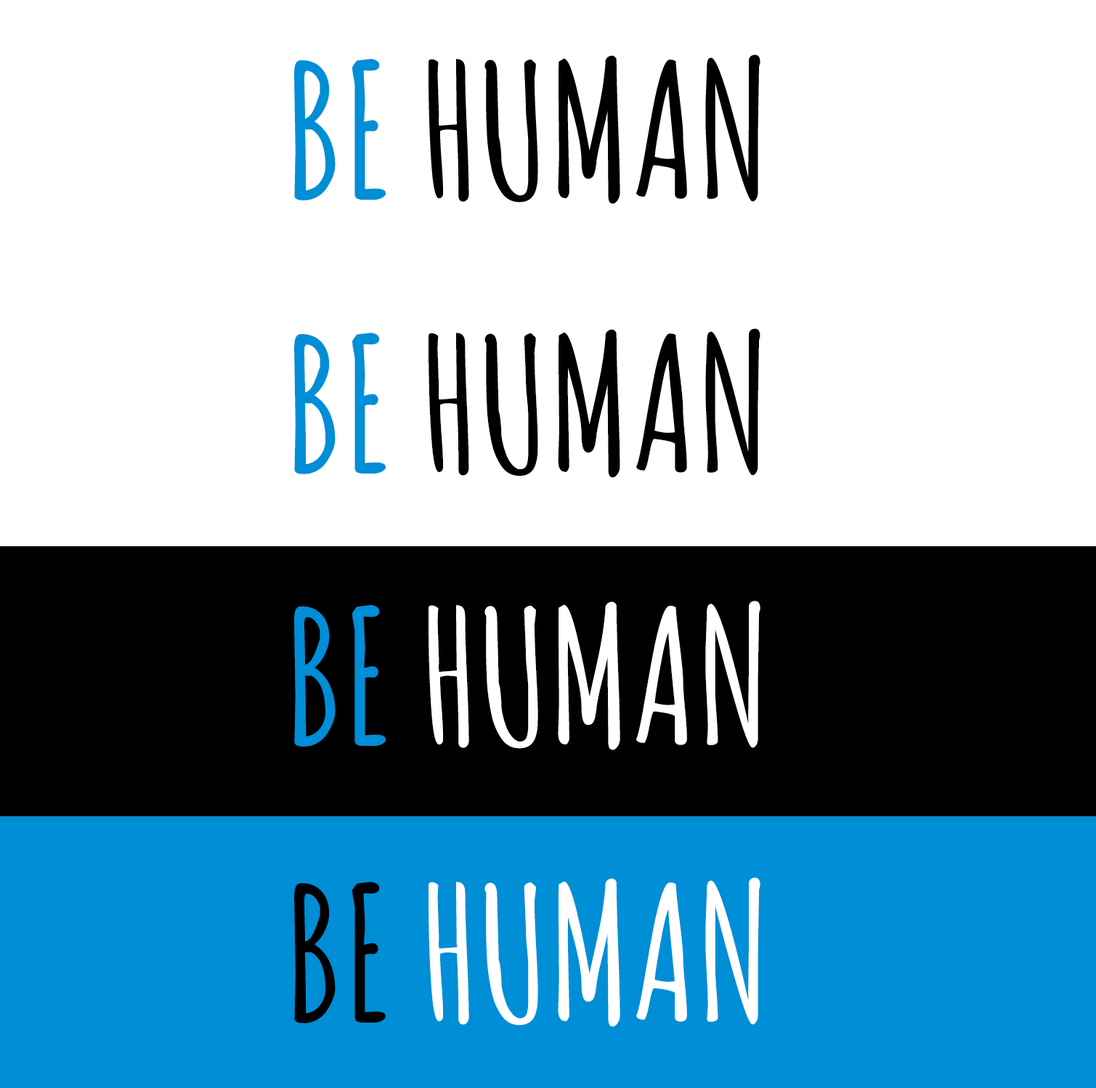
<style>
.page{position:relative;width:1096px;height:1088px;background:#ffffff}
.page>*{position:absolute;margin:0}
.t1{font:184.4px "Amatic-Bold";letter-spacing:0.04em;color:#000000}
.t2{font:184.4px "Amatic-Bold";letter-spacing:0.04em;color:#008ed6}
.t3{font:184.4px "Amatic-Bold";letter-spacing:0.04em;color:#ffffff}
</style>
<div class="page">
<p class="t1" style="left:294px;top:54px;width:466px;height:150px"><span class="t2">BE </span>HUMAN</p>
<p class="t1" style="left:294px;top:328px;width:466px;height:150px"><span class="t2">BE </span>HUMAN</p>
<p class="t3" style="left:294px;top:601px;width:466px;height:149px"><span class="t2">BE </span>HUMAN</p>
<p class="t3" style="left:294px;top:877px;width:466px;height:150px"><span class="t1">BE </span>HUMAN</p>
</div>
